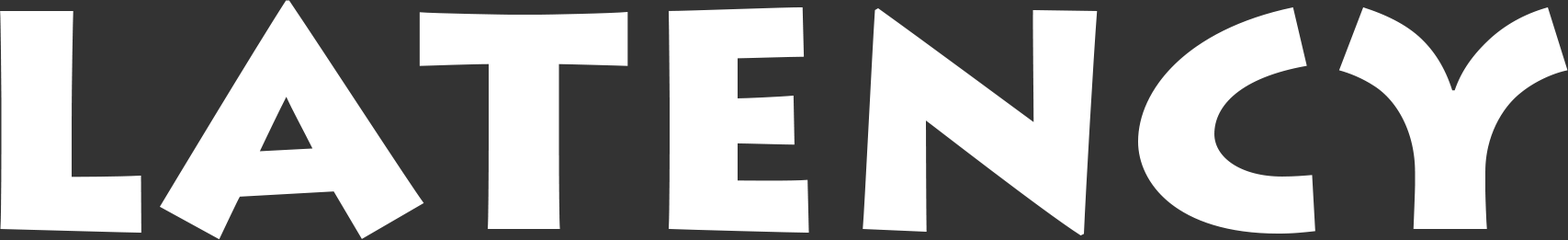
<style>
.page{position:relative;width:1568px;height:240px;background:#333333}
.page>*{position:absolute;margin:0}
.t1{font:306.2px "LithosPro-Black";letter-spacing:0.03em;color:#ffffff}
</style>
<div class="page">
<p class="t1" style="left:0px;top:0px;width:1568px;height:240px">LATENCY</p>
</div>
